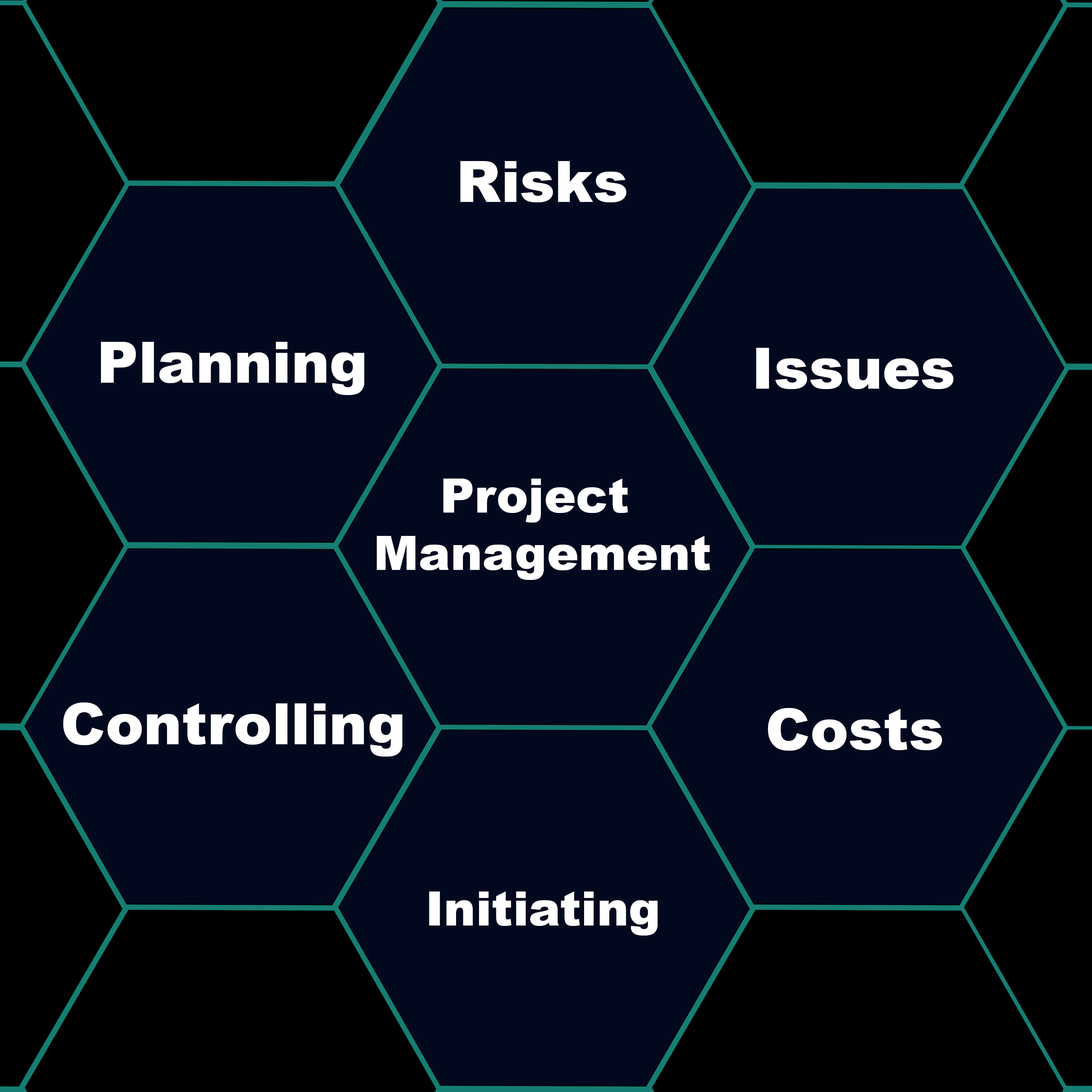
<style>
.page{position:relative;width:1092px;height:1092px;background:#02091e}
.page>*{position:absolute;margin:0}
.t1{font:57.4px "Arial-Black";color:#ffffff}
.t2{font:47.8px "Arial-Black";color:#ffffff}
</style>
<div class="page">
<p class="t1" style="left:460px;top:161px;width:166px;height:41px">Risks</p>
<p class="t1" style="left:101px;top:342px;width:263px;height:53px">Planning</p>
<p class="t1" style="left:756px;top:348px;width:197px;height:41px">Issues</p>
<p class="t2" style="left:377px;top:479px;width:333px;height:101px;text-align:center">Project <br>Management</p>
<p class="t1" style="left:63px;top:702px;width:339px;height:55px">Controlling</p>
<p class="t1" style="left:768px;top:708px;width:174px;height:43px">Costs</p>
<p class="t2" style="left:429px;top:891px;width:229px;height:45px">Initiating</p>
</div>
